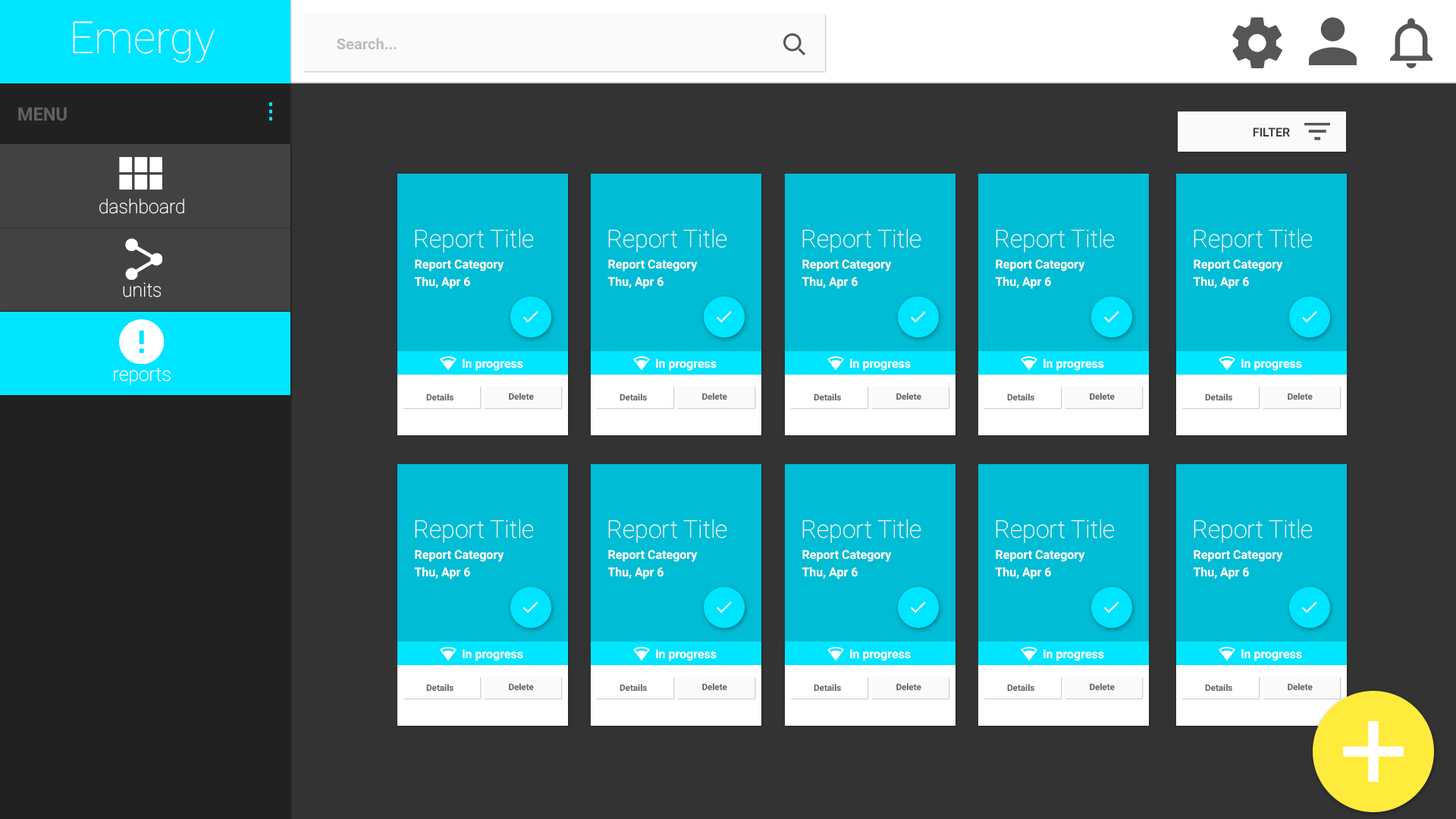
<style>
.page{position:relative;width:1456px;height:819px;background:#333333}
.page>*{position:absolute;margin:0}
.t1{font:44.2px "Roboto-Thin";color:#ffffff}
.t2{font:15.2px "Roboto-Bold";color:#bcbbb9}
.t3{font:18.3px "Roboto-Bold";color:#616161}
.t4{font:12.1px "Roboto-Bold";color:#424242}
.t5{font:19px "Roboto-Thin";color:#ffffff}
.t6{font:24.3px "Roboto-Thin";color:#fefefe}
.t7{font:12.1px "Roboto-Bold";color:#fefefe}
.t8{font:8.9px "Roboto-Bold";color:#616161}
</style>
<div class="page">
<p class="t1" style="left:73px;top:21px;width:142px;height:42px">Emergy</p>
<p class="t2" style="left:337px;top:38px;width:60px;height:12px">Search...</p>
<p class="t3" style="left:18px;top:107px;width:49px;height:14px">MENU</p>
<p class="t4" style="left:1253px;top:127px;width:37px;height:9px">FILTER</p>
<p class="t5" style="left:99px;top:199px;width:85px;height:15px">dashboard</p>
<p class="t6" style="left:415px;top:228px;width:119px;height:25px">Report Title</p>
<p class="t6" style="left:608px;top:228px;width:119px;height:25px">Report Title</p>
<p class="t6" style="left:802px;top:228px;width:119px;height:25px">Report Title</p>
<p class="t6" style="left:996px;top:228px;width:119px;height:25px">Report Title</p>
<p class="t6" style="left:1194px;top:228px;width:119px;height:25px">Report Title</p>
<p class="t7" style="left:415px;top:259px;width:89px;height:12px">Report Category</p>
<p class="t7" style="left:608px;top:259px;width:90px;height:12px">Report Category</p>
<p class="t7" style="left:802px;top:259px;width:90px;height:12px">Report Category</p>
<p class="t7" style="left:996px;top:259px;width:89px;height:12px">Report Category</p>
<p class="t7" style="left:1194px;top:259px;width:89px;height:12px">Report Category</p>
<p class="t7" style="left:414px;top:277px;width:56px;height:12px">Thu, Apr 6</p>
<p class="t7" style="left:607px;top:277px;width:57px;height:12px">Thu, Apr 6</p>
<p class="t7" style="left:802px;top:277px;width:56px;height:12px">Thu, Apr 6</p>
<p class="t7" style="left:995px;top:277px;width:56px;height:12px">Thu, Apr 6</p>
<p class="t7" style="left:1193px;top:277px;width:56px;height:12px">Thu, Apr 6</p>
<p class="t5" style="left:123px;top:282px;width:38px;height:15px">units</p>
<p class="t7" style="left:463px;top:359px;width:60px;height:12px">In progress</p>
<p class="t7" style="left:656px;top:359px;width:61px;height:12px">In progress</p>
<p class="t7" style="left:850px;top:359px;width:61px;height:12px">In progress</p>
<p class="t7" style="left:1043px;top:359px;width:61px;height:12px">In progress</p>
<p class="t7" style="left:1241px;top:359px;width:61px;height:12px">In progress</p>
<p class="t5" style="left:114px;top:368px;width:57px;height:17px">reports</p>
<p class="t8" style="left:426px;top:394px;width:27px;height:7px">Details</p>
<p class="t8" style="left:509px;top:393px;width:25px;height:7px">Delete</p>
<p class="t8" style="left:620px;top:394px;width:27px;height:7px">Details</p>
<p class="t8" style="left:702px;top:393px;width:25px;height:7px">Delete</p>
<p class="t8" style="left:814px;top:394px;width:27px;height:7px">Details</p>
<p class="t8" style="left:896px;top:393px;width:25px;height:7px">Delete</p>
<p class="t8" style="left:1007px;top:394px;width:27px;height:7px">Details</p>
<p class="t8" style="left:1090px;top:393px;width:25px;height:7px">Delete</p>
<p class="t8" style="left:1205px;top:394px;width:27px;height:7px">Details</p>
<p class="t8" style="left:1288px;top:393px;width:25px;height:7px">Delete</p>
<p class="t6" style="left:415px;top:519px;width:119px;height:24px">Report Title</p>
<p class="t6" style="left:608px;top:519px;width:119px;height:24px">Report Title</p>
<p class="t6" style="left:802px;top:519px;width:119px;height:24px">Report Title</p>
<p class="t6" style="left:996px;top:519px;width:119px;height:24px">Report Title</p>
<p class="t6" style="left:1194px;top:519px;width:119px;height:24px">Report Title</p>
<p class="t7" style="left:415px;top:550px;width:89px;height:12px">Report Category</p>
<p class="t7" style="left:608px;top:550px;width:90px;height:12px">Report Category</p>
<p class="t7" style="left:802px;top:550px;width:90px;height:12px">Report Category</p>
<p class="t7" style="left:996px;top:550px;width:89px;height:12px">Report Category</p>
<p class="t7" style="left:1194px;top:550px;width:89px;height:12px">Report Category</p>
<p class="t7" style="left:414px;top:567px;width:56px;height:12px">Thu, Apr 6</p>
<p class="t7" style="left:607px;top:567px;width:57px;height:12px">Thu, Apr 6</p>
<p class="t7" style="left:802px;top:567px;width:56px;height:12px">Thu, Apr 6</p>
<p class="t7" style="left:995px;top:567px;width:56px;height:12px">Thu, Apr 6</p>
<p class="t7" style="left:1193px;top:567px;width:56px;height:12px">Thu, Apr 6</p>
<p class="t7" style="left:463px;top:649px;width:60px;height:12px">In progress</p>
<p class="t7" style="left:656px;top:649px;width:61px;height:12px">In progress</p>
<p class="t7" style="left:850px;top:649px;width:61px;height:12px">In progress</p>
<p class="t7" style="left:1043px;top:649px;width:61px;height:12px">In progress</p>
<p class="t7" style="left:1241px;top:649px;width:61px;height:12px">In progress</p>
<p class="t8" style="left:426px;top:684px;width:27px;height:8px">Details</p>
<p class="t8" style="left:509px;top:683px;width:25px;height:8px">Delete</p>
<p class="t8" style="left:620px;top:684px;width:27px;height:8px">Details</p>
<p class="t8" style="left:702px;top:683px;width:25px;height:8px">Delete</p>
<p class="t8" style="left:814px;top:684px;width:27px;height:8px">Details</p>
<p class="t8" style="left:896px;top:683px;width:25px;height:8px">Delete</p>
<p class="t8" style="left:1007px;top:684px;width:27px;height:8px">Details</p>
<p class="t8" style="left:1090px;top:683px;width:25px;height:8px">Delete</p>
<p class="t8" style="left:1205px;top:684px;width:27px;height:8px">Details</p>
<p class="t8" style="left:1288px;top:683px;width:25px;height:8px">Delete</p>
</div>
